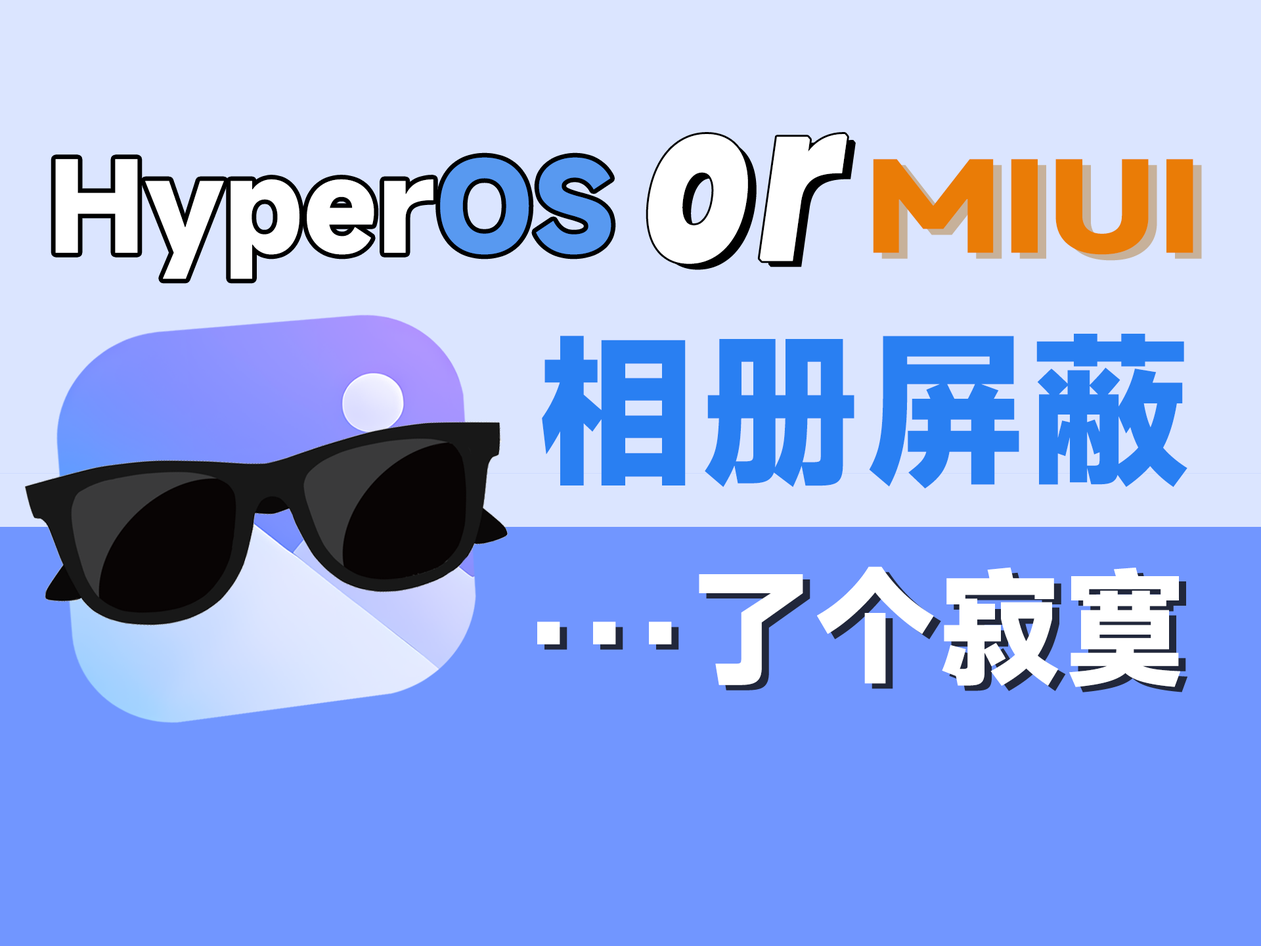
<style>
.page{position:relative;width:1261px;height:946px;background:#7196ff}
.page>*{position:absolute;margin:0}
.t1{font:197px "MiSans-Heavy";letter-spacing:0.05em;color:#ffffff;font-weight:bold;font-style:italic;scale:0.8 1}
.t2{font:118.2px "MiSans-Heavy";color:#ffffff}
.t3{font:118.2px "MiSans-Heavy";color:#5899f0}
.t4{font:118.2px "MiSans-Heavy";color:#ea7c06;scale:1.2 1}
.t5{font:164.2px "MiSans-Heavy";color:#297ff2}
.t6{font:124.8px "MiSans-Heavy";color:#ffffff}
.t7{font:111.6px "MiSans-Heavy";color:#ffffff}
</style>
<div class="page">
<p class="t1" style="left:648px;top:134px;width:199px;height:130px">or</p>
<p class="t2" style="left:55px;top:157px;width:556px;height:122px">Hyper<span class="t3">OS</span></p>
<p class="t4" style="left:873px;top:159px;width:320px;height:96px">MIUI</p>
<p class="t5" style="left:542px;top:334px;width:645px;height:155px">相册屏蔽</p>
<p class="t6" style="left:537px;top:566px;width:643px;height:121px"><span class="t7">···</span>了个寂寞</p>
</div>
